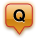
<style>
.page{position:relative;width:38px;height:38px}
.page>*{position:absolute;margin:0}
.t1{font:15.9px "HelveticaNeue-Bold";color:#000000}
</style>
<div class="page">
<p class="t1" style="left:13px;top:9px;width:12px;height:13px">Q</p>
</div>
